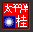
<style>
.page{position:relative;width:33px;height:32px;background:#f20000}
.page>*{position:absolute;margin:0}
.t1{font:10.4px "SimSun";letter-spacing:-0.25em;color:#ffffff}
.t2{font:11.7px "SimSun";color:#ffffff}
</style>
<div class="page">
<p class="t1" style="left:4px;top:4px;width:24px;height:9px">太平洋</p>
<p class="t2" style="left:16px;top:15px;width:11px;height:12px">桂</p>
</div>
